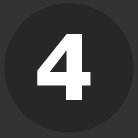
<style>
.page{position:relative;width:138px;height:138px;background:#272727}
.page>*{position:absolute;margin:0}
.t1{font:94px "HelveticaNeueLTStd-Hv";color:#ffffff}
</style>
<div class="page">
<p class="t1" style="left:37px;top:34px;width:54px;height:66px">4</p>
</div>
